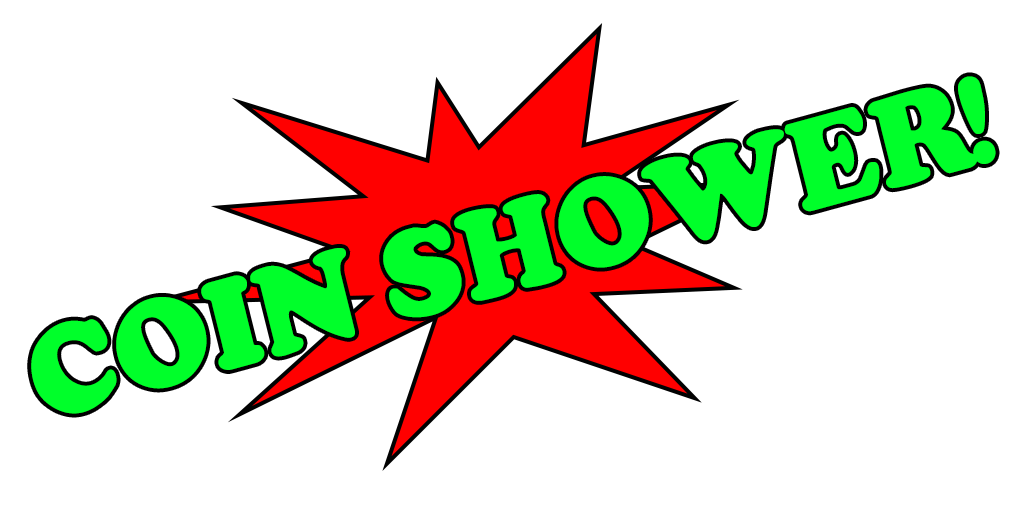
<style>
.page{position:relative;width:1024px;height:512px;background:#ffffff}
.page>*{position:absolute;margin:0}
.t1{font:111.1px "Coolsville";color:#00ff2a;scale:0.95 1}
</style>
<div class="page">
<p class="t1" style="left:31px;top:76px;width:965px;height:338px;rotate:-15deg">COIN SHOWER!</p>
</div>
